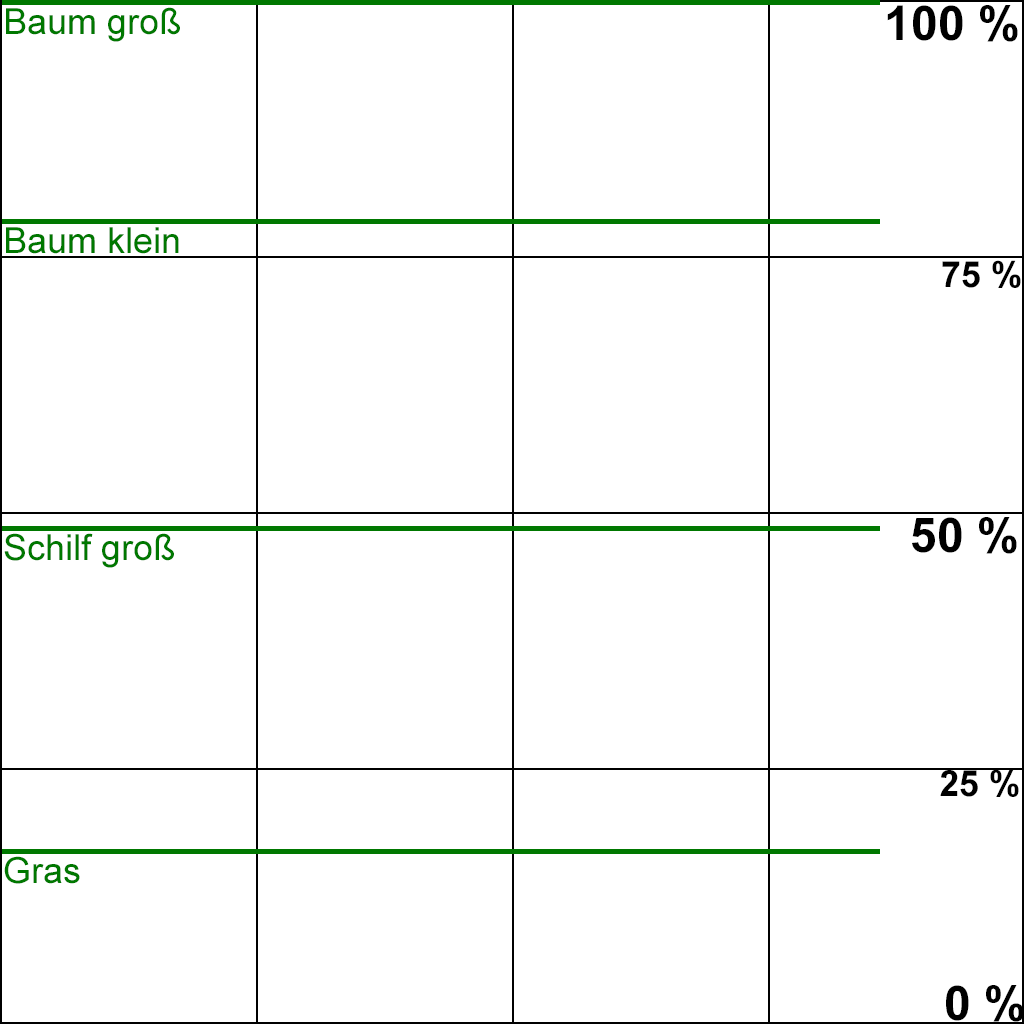
<style>
.page{position:relative;width:1024px;height:1024px;background:#ffffff}
.page>*{position:absolute;margin:0}
.t1{font:48px "Arial-BoldMT";color:#000000;text-transform:uppercase}
.t2{font:36px "ArialMT";color:#007800}
.t3{font:36px "Arial-BoldMT";color:#000000;text-transform:uppercase}
</style>
<div class="page">
<p class="t1" style="left:887px;top:5px;width:131px;height:37px">100 %</p>
<p class="t2" style="left:6px;top:7px;width:174px;height:35px">Baum groß</p>
<p class="t2" style="left:6px;top:227px;width:173px;height:27px">Baum klein</p>
<p class="t3" style="left:942px;top:260px;width:79px;height:28px">75 %</p>
<p class="t1" style="left:912px;top:517px;width:105px;height:37px">50 %</p>
<p class="t2" style="left:4px;top:533px;width:170px;height:35px">Schilf groß</p>
<p class="t3" style="left:940px;top:769px;width:79px;height:28px">25 %</p>
<p class="t2" style="left:4px;top:856px;width:76px;height:28px">Gras</p>
<p class="t1" style="left:946px;top:985px;width:78px;height:37px">0 %</p>
</div>
